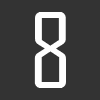
<style>
.page{position:relative;width:100px;height:100px;background:#333333}
.page>*{position:absolute;margin:0}
.t1{font:100px "AgencyFB-Reg";color:#ffffff}
</style>
<div class="page">
<p class="t1" style="left:34px;top:12px;width:32px;height:76px">8</p>
</div>
